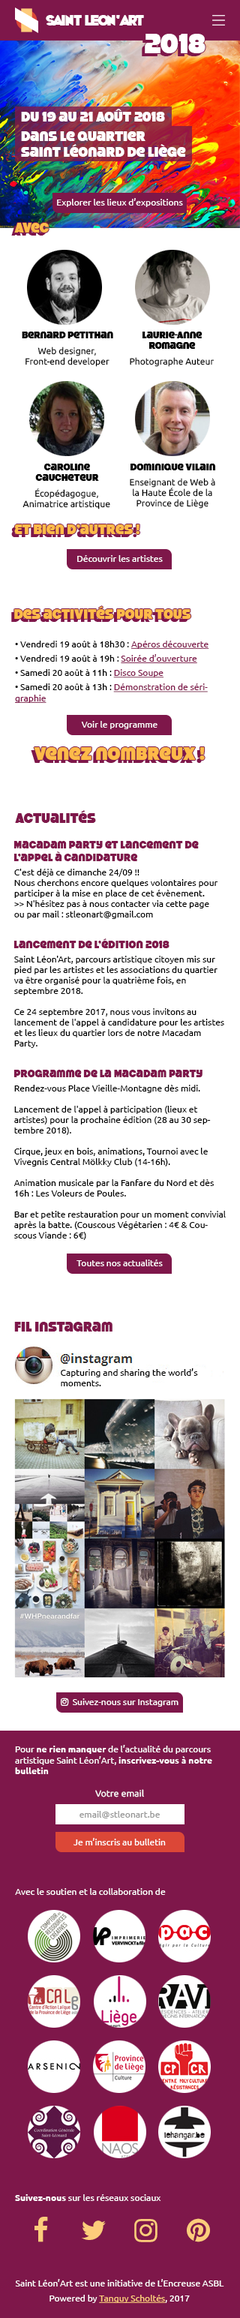
<style>
.page{position:relative;width:240px;height:2318px;background:#ffffff}
.page>*{position:absolute;margin:0}
.t1{font:13.5px "WhoopAss";color:#ffffff}
.t2{font:27px "StrenuousBl-Regular";color:#ffffff}
.t3{font:13.5px "StrenuousBl-Regular";color:#ffffff}
.t4{font:9px "Ubuntu";color:#ffffff}
.t5{font:13.5px "StrenuousBl-Regular";color:#ffba49}
.t6{font:9px "StrenuousBl-Regular";color:#000000;scale:1.05 1}
.t7{font:9px "StrenuousBl-Regular";color:#000000;scale:1.04 1}
.t8{font:9px "Ubuntu";color:#000000}
.t9{font:8.9px "Ubuntu";color:#000000}
.t10{font:9px "Ubuntu";color:#7e174a;text-decoration:underline}
.t11{font:3px "Ubuntu";color:#000000}
.t12{font:18px "StrenuousBl-Regular";color:#ffba49}
.t13{font:13.5px "StrenuousBl-Regular";color:#7e174a}
.t14{font:10.5px "StrenuousBl-Regular";color:#7e174a}
.t15{font:9px/10.5px "Ubuntu";color:#000000}
.t16{font:9px "Ubuntu-Bold";color:#ffffff}
.t17{font:9px "Ubuntu";color:#ffffff;scale:1.04 1}
.t18{font:9px "Ubuntu";color:#969696}
.t19{font:9px "Ubuntu";color:#fdcc7b;text-decoration:underline}
</style>
<div class="page">
<p class="t1" style="left:46px;top:15px;width:98px;height:11px">Saint LEON’ART</p>
<p class="t2" style="left:145px;top:34px;width:61px;height:19px">2018</p>
<p class="t3" style="left:21px;top:109px;width:144px;height:13px">Du 19 au 21 Août 2018</p>
<p class="t3" style="left:21px;top:131px;width:165px;height:26px">Dans le quartier<br>Saint Léonard de Liège</p>
<p class="t4" style="left:57px;top:198px;width:126px;height:9px">Explorer les lieux d’expositions</p>
<p class="t5" style="left:14px;top:223px;width:35px;height:9px">Avec</p>
<p class="t6" style="left:22px;top:332px;width:91px;height:6px">Bernard Petithan</p>
<p class="t7" style="left:142px;top:332px;width:60px;height:17px;text-align:center">Laurie-Anne<br>Romagne</p>
<p class="t8" style="left:26px;top:346px;width:84px;height:21px;text-align:center">Web designer,<br>Front-end developer</p>
<p class="t8" style="left:130px;top:357px;width:84px;height:10px">Photographe Auteur</p>
<p class="t6" style="left:35px;top:464px;width:64px;height:17px;text-align:center">Caroline<br>Caucheteur</p>
<p class="t6" style="left:130px;top:464px;width:85px;height:6px">Dominique Vilain</p>
<p class="t9" style="left:130px;top:478px;width:85px;height:30px;text-align:center">Enseignant de Web à<br>la Haute École de la<br>Province de Liège</p>
<p class="t8" style="left:22px;top:488px;width:88px;height:21px;text-align:center">Écopédagogue,<br>Animatrice artistique</p>
<p class="t5" style="left:14px;top:524px;width:126px;height:10px">Et bien d’autres !</p>
<p class="t4" style="left:77px;top:555px;width:86px;height:7px">Découvrir les artistes</p>
<p class="t5" style="left:14px;top:606px;width:177px;height:13px">Des activités pour tous</p>
<p class="t10" style="left:15px;top:640px;width:194px;height:63px"><span class="t8">• Vendredi 19 août à 18h30 : </span>Apéros découverte<br><span class="t11"> <br></span><span class="t8">• Vendredi 19 août à 19h : </span>Soirée d’ouverture<br><span class="t11"> <br></span><span class="t8">• Samedi 20 août à 11h : </span>Disco Soupe<br> <br><span class="t8">• Samedi 20 août à 13h : </span>Démonstration de séri-<br>graphie</p>
<p class="t4" style="left:81px;top:721px;width:77px;height:8px">Voir le programme</p>
<p class="t12" style="left:34px;top:747px;width:171px;height:13px">Venez nombreux !</p>
<p class="t13" style="left:15px;top:810px;width:81px;height:13px">Actualités</p>
<p class="t14" style="left:14px;top:841px;width:185px;height:20px">Macadam Party et Lancement de<br>l’appel à candidature</p>
<p class="t15" style="left:14px;top:868px;width:204px;height:51px">C'est déjà ce dimanche 24/09 !!<br>Nous cherchons encore quelques volontaires pour<br>participer à la mise en place de cet évènement.<br>&gt;&gt; N'hésitez pas à nous contacter via cette page<br>ou par mail : stleonart@gmail.com</p>
<p class="t14" style="left:14px;top:938px;width:156px;height:10px">Lancement de l’édition 2018</p>
<p class="t15" style="left:14px;top:956px;width:210px;height:92px">Saint Léon'Art, parcours artistique citoyen mis sur<br>pied par les artistes et les associations du quartier<br>va être organisé pour la quatrième fois, en<br>septembre 2018.<br><br>Ce 24 septembre 2017, nous vous invitons au<br>lancement de l'appel à candidature pour les artistes<br>et les lieux du quartier lors de notre Macadam<br>Party.</p>
<p class="t14" style="left:14px;top:1070px;width:188px;height:7px">Programme de la Macadam Party</p>
<p class="t15" style="left:14px;top:1084px;width:212px;height:156px">Rendez-vous Place Vieille-Montagne dès midi.<br><br>Lancement de l'appel à participation (lieux et<br>artistes) pour la prochaine édition (28 au 30 sep-<br>tembre 2018).<br><br>Cirque, jeux en bois, animations, Tournoi avec le<br>Vivegnis Central Mölkky Club (14-16h).<br><br>Animation musicale par la Fanfare du Nord et dès<br>16h : Les Voleurs de Poules.<br><br>Bar et petite restauration pour un moment convivial<br>après la batte. (Couscous Végétarien : 4€ &amp; Cou-<br>scous Viande : 6€)</p>
<p class="t4" style="left:76px;top:1259px;width:87px;height:7px">Toutes nos actualités</p>
<p class="t13" style="left:14px;top:1322px;width:98px;height:9px">Fil Instagram</p>
<p class="t8" style="left:61px;top:1368px;width:137px;height:18px">Capturing and sharing the world’s<br>moments.</p>
<p class="t4" style="left:15px;top:1744px;width:197px;height:30px">Pour <span class="t16">ne rien manquer</span> de l’actualité du parcours artistique Saint Léon’Art, <span class="t16">inscrivez-vous à notre bulletin</span></p>
<p class="t17" style="left:95px;top:1789px;width:49px;height:8px">Votre email</p>
<p class="t18" style="left:80px;top:1810px;width:80px;height:8px">email@stleonart.be</p>
<p class="t4" style="left:74px;top:1838px;width:92px;height:7px">Je m’inscris au bulletin</p>
<p class="t4" style="left:15px;top:1888px;width:151px;height:6px">Avec le soutien et la collaboration de</p>
<p class="t4" style="left:15px;top:2194px;width:146px;height:6px"><span class="t16">Suivez-nous</span> sur les réseaux sociaux</p>
<p class="t4" style="left:15px;top:2278px;width:209px;height:8px">Saint Léon’Art est une initiative de L’Encreuse ASBL</p>
<p class="t19" style="left:50px;top:2294px;width:140px;height:8px"><span class="t4">Powered by </span>Tanguy Scholtés<span class="t4">, 2017</span></p>
</div>
